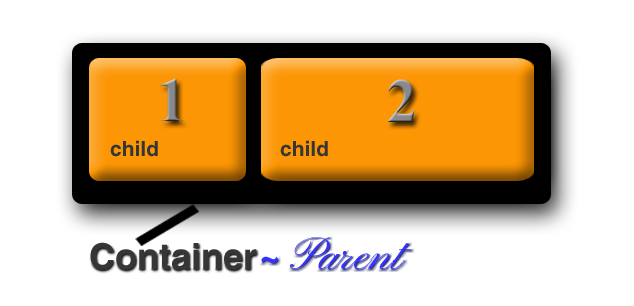
<style>
.page{position:relative;width:634px;height:306px;background:#ffffff}
.page>*{position:absolute;margin:0}
.t1{font:63px "TimesNewRomanPS-BoldMT";color:#898989}
.t2{font:63px "TimesNewRomanPS-BoldMT"}
.t3{font:21px "HelveticaLTStd-Bold";color:#363636}
.t4{font:36px "HelveticaLTStd-Bold";color:#363636}
.t5{font:46px "PinyonScript-Regular";color:#3333ff}
.t6{font:36px "HelveticaLTStd-Bold";color:#3333ff}
</style>
<div class="page">
<p class="t1" style="left:160px;top:78px;width:23px;height:43px">1</p>
<p class="t2" style="left:387px;top:79px;width:28px;height:43px">2</p>
<p class="t3" style="left:110px;top:140px;width:48px;height:17px">child</p>
<p class="t3" style="left:280px;top:140px;width:48px;height:17px">child</p>
<p class="t4" style="left:90px;top:242px;width:167px;height:28px">Container</p>
<p class="t5" style="left:261px;top:237px;width:151px;height:32px"><span class="t4"> </span><span class="t6">~ </span>Parent</p>
</div>
